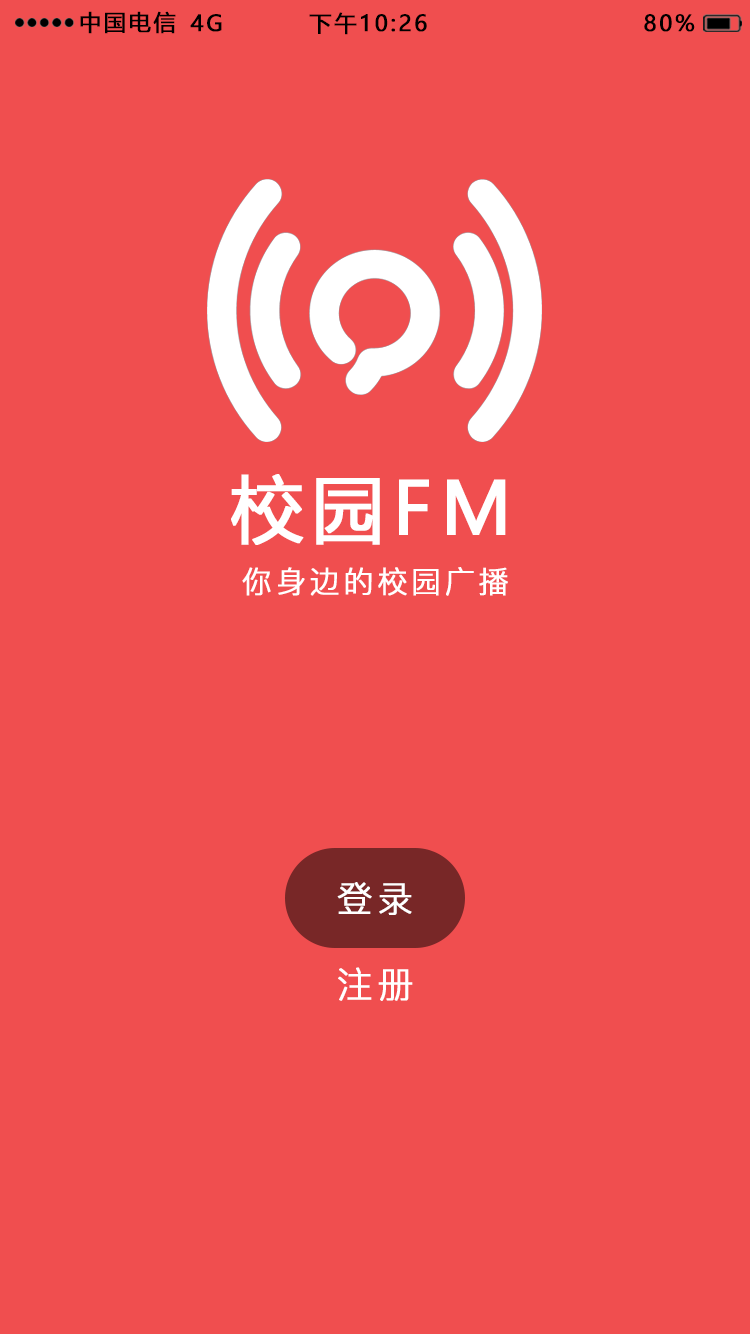
<style>
.page{position:relative;width:750px;height:1334px;background:#f04e4f}
.page>*{position:absolute;margin:0}
.t1{font:22px "MicrosoftYaHei";letter-spacing:0.1em;color:#000000;text-transform:uppercase;font-weight:bold}
.t2{font:72px "MicrosoftYaHei";letter-spacing:0.1em;color:#ffffff;text-transform:uppercase;font-weight:bold}
.t3{font:30px "PingFang-SC-Regular";letter-spacing:0.1em;color:#ffffff;text-transform:uppercase;font-weight:bold}
.t4{font:36px "PingFang-SC-Regular";letter-spacing:0.1em;color:#ffffff;text-transform:uppercase;font-weight:bold}
</style>
<div class="page">
<p class="t1" style="left:80px;top:11px;width:96px;height:23px">中国电信</p>
<p class="t1" style="left:190px;top:14px;width:32px;height:18px">4G</p>
<p class="t1" style="left:309px;top:12px;width:118px;height:23px">下午10:26</p>
<p class="t1" style="left:644px;top:14px;width:51px;height:18px">80%</p>
<p class="t2" style="left:231px;top:474px;width:275px;height:71px">校园FM</p>
<p class="t3" style="left:242px;top:567px;width:266px;height:29px">你身边的校园广播</p>
<p class="t4" style="left:337px;top:882px;width:75px;height:33px">登录</p>
<p class="t4" style="left:338px;top:967px;width:75px;height:34px">注册</p>
</div>
